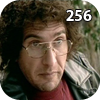
<style>
.page{position:relative;width:100px;height:100px}
.page>*{position:absolute;margin:0}
.t1{font:15.7px "MyriadPro-Bold";color:#ffffff}
</style>
<div class="page">
<p class="t1" style="left:66px;top:10px;width:26px;height:11px">256</p>
</div>
